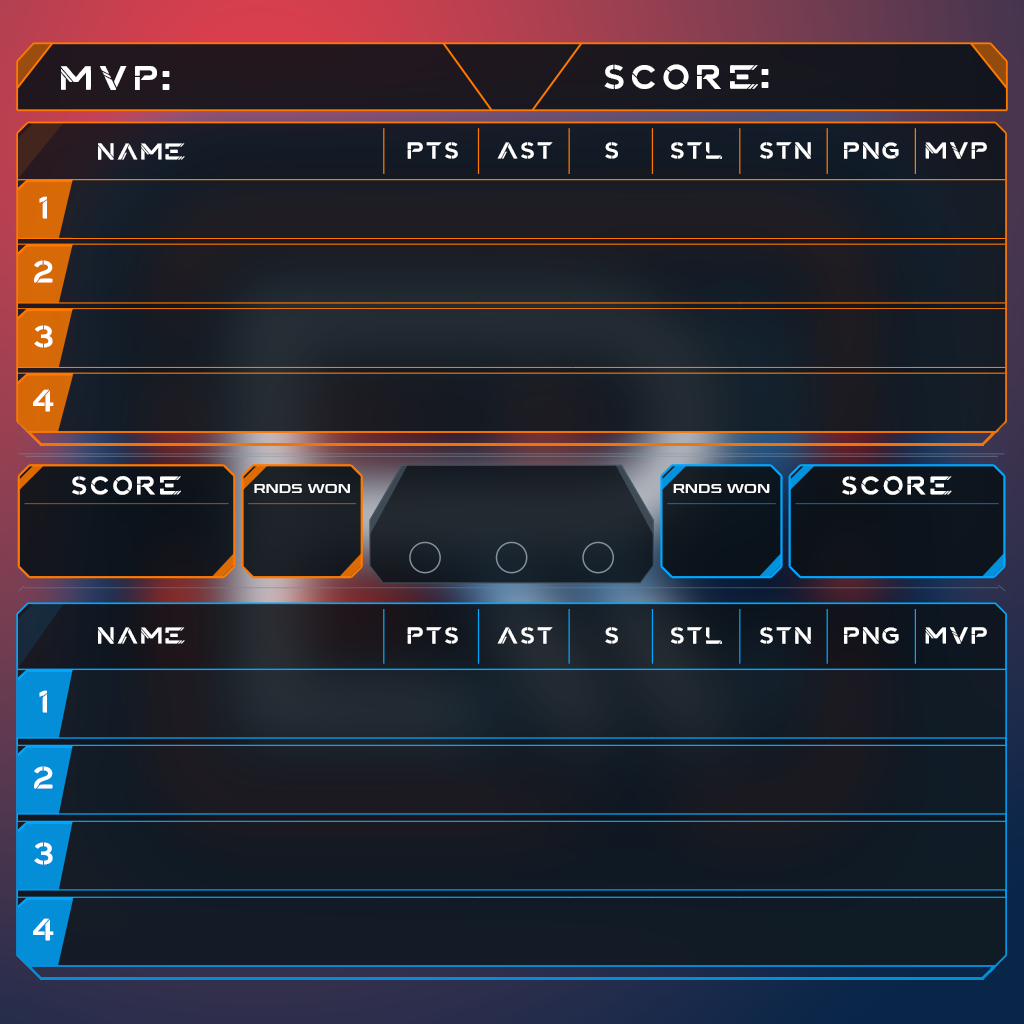
<style>
.page{position:relative;width:1024px;height:1024px}
.page>*{position:absolute;margin:0}
.t1{font:28px "EchoStencil";letter-spacing:0.1em;color:#ffffff}
.t2{font:45px "ConthraxSb-Regular";letter-spacing:0.1em;color:#ffffff}
.t3{font:19px "EchoStencil";color:#ffffff}
.t4{font:25px "EchoStencil";color:#ffffff}
.t5{font:21px "EchoStencil";letter-spacing:0.03em;color:#ffffff}
.t6{font:13px "ConthraxSb-Regular";letter-spacing:0.03em;color:#ffffff}
</style>
<div class="page">
<p class="t1" style="left:604px;top:64px;width:154px;height:26px">SCORE:</p>
<p class="t1" style="left:61px;top:66px;width:96px;height:24px">MVP:</p>
<p class="t2" style="left:162px;top:71px;width:8px;height:19px">:</p>
<p class="t2" style="left:761px;top:69px;width:8px;height:19px">:</p>
<p class="t3" style="left:98px;top:143px;width:87px;height:17px">NAME</p>
<p class="t3" style="left:407px;top:142px;width:51px;height:17px">PTS</p>
<p class="t3" style="left:497px;top:142px;width:56px;height:17px">AST</p>
<p class="t3" style="left:605px;top:142px;width:13px;height:17px">S</p>
<p class="t3" style="left:671px;top:142px;width:51px;height:17px">STL</p>
<p class="t3" style="left:760px;top:142px;width:51px;height:17px">STN</p>
<p class="t3" style="left:844px;top:142px;width:55px;height:17px">PNG</p>
<p class="t3" style="left:925px;top:142px;width:62px;height:17px">MVP</p>
<p class="t4" style="left:39px;top:196px;width:8px;height:23px">1</p>
<p class="t4" style="left:34px;top:260px;width:19px;height:23px">2</p>
<p class="t4" style="left:34px;top:325px;width:19px;height:23px">3</p>
<p class="t4" style="left:33px;top:389px;width:21px;height:23px">4</p>
<p class="t5" style="left:72px;top:476px;width:109px;height:19px">SCORE</p>
<p class="t6" style="left:254px;top:484px;width:96px;height:9px">RNDS WON</p>
<p class="t6" style="left:673px;top:484px;width:97px;height:9px">RNDS WON</p>
<p class="t5" style="left:842px;top:476px;width:110px;height:19px">SCORE</p>
<p class="t3" style="left:98px;top:627px;width:87px;height:17px">NAME</p>
<p class="t3" style="left:407px;top:627px;width:51px;height:17px">PTS</p>
<p class="t3" style="left:497px;top:627px;width:56px;height:17px">AST</p>
<p class="t3" style="left:605px;top:627px;width:13px;height:17px">S</p>
<p class="t3" style="left:671px;top:627px;width:51px;height:17px">STL</p>
<p class="t3" style="left:760px;top:627px;width:51px;height:17px">STN</p>
<p class="t3" style="left:844px;top:627px;width:55px;height:17px">PNG</p>
<p class="t3" style="left:925px;top:627px;width:62px;height:17px">MVP</p>
<p class="t4" style="left:39px;top:690px;width:8px;height:23px">1</p>
<p class="t4" style="left:34px;top:766px;width:19px;height:23px">2</p>
<p class="t4" style="left:34px;top:842px;width:19px;height:23px">3</p>
<p class="t4" style="left:33px;top:918px;width:21px;height:23px">4</p>
</div>
